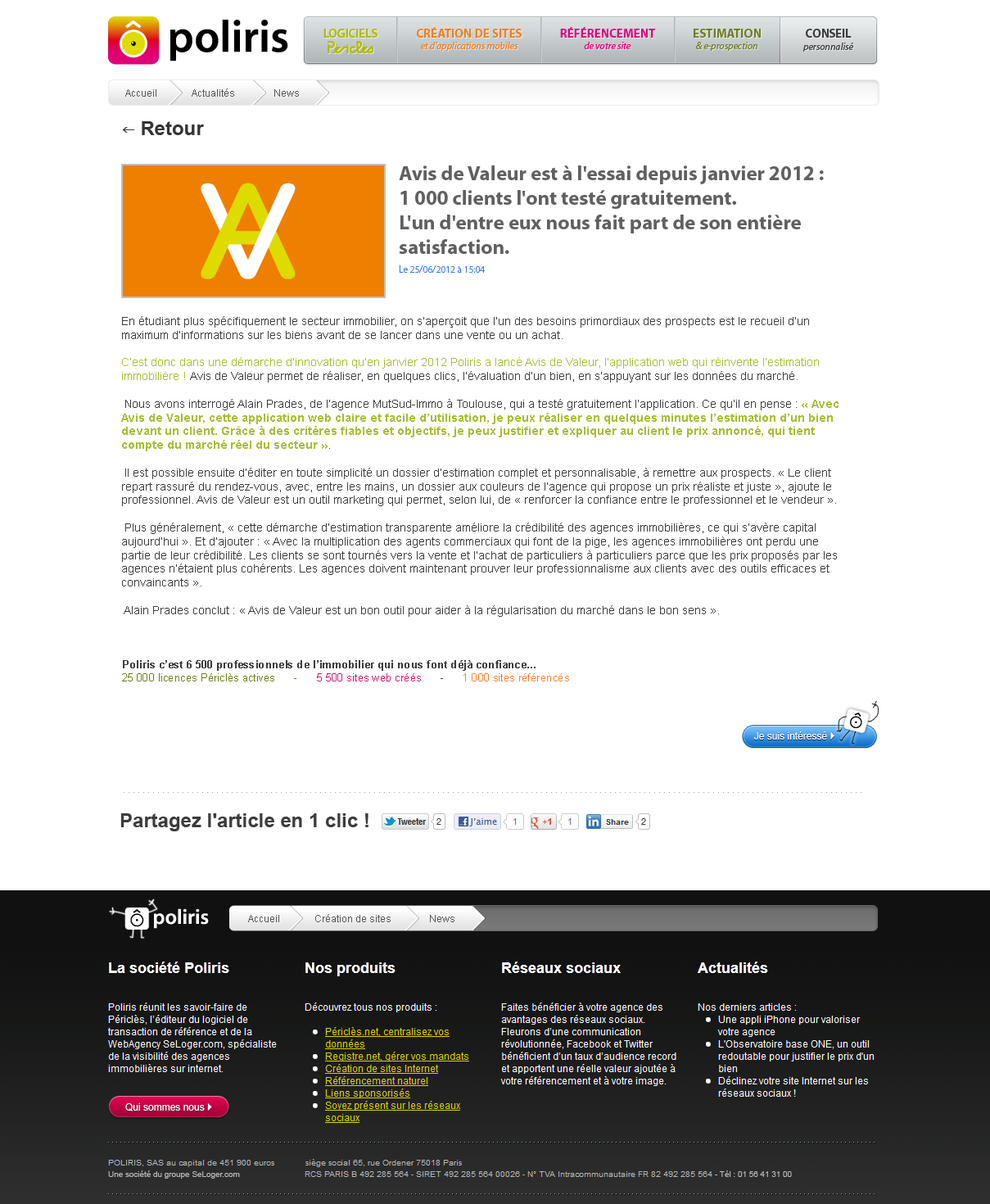
<style>
.page{position:relative;width:990px;height:1204px;background:#ffffff}
.page>*{position:absolute;margin:0}
.t1{font:12.3px "MyriadPro-Bold";letter-spacing:-0.02em;color:#b0bc00}
.t2{font:12.3px "MyriadPro-Bold";color:#ee801f;text-transform:uppercase}
.t3{font:12.3px "MyriadPro-Bold";color:#e1007a;text-transform:uppercase}
.t4{font:12.3px "MyriadPro-Bold";color:#6f7d21;text-transform:uppercase}
.t5{font:12.3px "MyriadPro-Bold";letter-spacing:-0.02em;color:#3c3c3c}
.t6{font:9.8px "MyriadPro-It";color:#ee801f}
.t7{font:9.8px "MyriadPro-It";color:#e1007a}
.t8{font:9.8px "MyriadPro-It";color:#6f7d21}
.t9{font:9.8px "MyriadPro-It";color:#3c3c3c}
.t10{font:9.8px "ArialMT";color:#565656}
.t11{font:19.7px "Arial-BoldMT";color:#343434}
.t12{font:16.4px "Wingdings3";color:#3e3e3e}
.t13{font:20.5px "MyriadPro-Bold";color:#606060}
.t14{font:9.8px "MyriadPro-Light";color:#357de3}
.t15{font:11.5px "ArialMT";color:#3c3c3c}
.t16{font:11.5px "ArialMT";color:#a7be38}
.t17{font:11.5px "Arial-BoldMT";color:#a7be38}
.t18{font:10.9px/6.3px "Arial-BoldMT";color:#3c3c3c}
.t19{font:10.9px/6.3px "ArialMT";color:#3c3c3c}
.t20{font:10.9px/6.3px "ArialMT";color:#6d7e17}
.t21{font:10.9px/6.3px "ArialMT";color:#d11b6f}
.t22{font:10.9px/6.3px "ArialMT";color:#f5822e}
.t23{font:9.8px "ArialMT";color:#ffffff}
.t24{font:9.8px "Wingdings3";color:#ffffff}
.t25{font:19.7px "Arial-BoldMT";color:#3c3c3c}
.t26{font:8.1px "ArialMT";color:#b9b9b9}
</style>
<div class="page">
<p class="t1" style="left:324px;top:29px;width:54px;height:9px">LOGICIELS</p>
<p class="t2" style="left:417px;top:27px;width:105px;height:11px">CRéATION DE SITES</p>
<p class="t3" style="left:560px;top:27px;width:95px;height:11px">Référencement</p>
<p class="t4" style="left:694px;top:29px;width:67px;height:9px">estimation</p>
<p class="t5" style="left:806px;top:29px;width:46px;height:9px">CONSEIL</p>
<p class="t6" style="left:421px;top:41px;width:98px;height:10px">et d’applications mobiles</p>
<p class="t7" style="left:584px;top:42px;width:48px;height:7px">de votre site</p>
<p class="t8" style="left:696px;top:42px;width:62px;height:9px">&amp; e-prospection</p>
<p class="t9" style="left:804px;top:43px;width:50px;height:9px">personnalisé</p>
<p class="t10" style="left:125px;top:89px;width:31px;height:8px">Accueil</p>
<p class="t10" style="left:192px;top:88px;width:42px;height:9px">Actualités</p>
<p class="t10" style="left:274px;top:89px;width:25px;height:8px">News</p>
<p class="t11" style="left:122px;top:121px;width:82px;height:14px"><span class="t12">f </span>Retour</p>
<p class="t13" style="left:399px;top:165px;width:425px;height:89px">Avis de Valeur est à l'essai depuis janvier 2012 : <br>1 000 clients l'ont testé gratuitement. <br>L'un d'entre eux nous fait part de son entière <br>satisfaction.</p>
<p class="t14" style="left:399px;top:265px;width:86px;height:8px">Le 25/06/2012 à 15:04</p>
<p class="t15" style="left:121px;top:316px;width:718px;height:301px">En étudiant plus spécifiquement le secteur immobilier, on s’aperçoit que l’un des besoins primordiaux des prospects est le recueil d’un maximum d’informations sur les biens avant de se lancer dans une vente ou un achat.<br><br><span class="t16">C’est donc dans une démarche d’innovation qu’en janvier 2012 Poliris a lancé Avis de Valeur, l’application web qui réinvente l’estimation immobilière ! </span>Avis de Valeur permet de réaliser, en quelques clics, l’évaluation d’un bien, en s’appuyant sur les données du marché.<br><br> Nous avons interrogé Alain Prades, de l’agence MutSud-Immo à Toulouse, qui a testé gratuitement l’application. Ce qu’il en pense : <span class="t17">« Avec Avis de Valeur, cette application web claire et facile d’utilisation, je peux réaliser en quelques minutes l’estimation d’un bien devant un client. Grâce à des critères fiables et objectifs, je peux justifier et expliquer au client le prix annoncé, qui tient compte du marché réel du secteur »</span>.<br><br> Il est possible ensuite d’éditer en toute simplicité un dossier d’estimation complet et personnalisable, à remettre aux prospects. « Le client repart rassuré du rendez-vous, avec, entre les mains, un dossier aux couleurs de l’agence qui propose un prix réaliste et juste », ajoute le professionnel. Avis de Valeur est un outil marketing qui permet, selon lui, de « renforcer la confiance entre le professionnel et le vendeur ».<br><br> Plus généralement, « cette démarche d’estimation transparente améliore la crédibilité des agences immobilières, ce qui s’avère capital aujourd’hui ». Et d’ajouter : « Avec la multiplication des agents commerciaux qui font de la pige, les agences immobilières ont perdu une partie de leur crédibilité. Les clients se sont tournés vers la vente et l’achat de particuliers à particuliers parce que les prix proposés par les agences n’étaient plus cohérents. Les agences doivent maintenant prouver leur professionnalisme aux clients avec des outils efficaces et convaincants ».<br><br> Alain Prades conclut : « Avis de Valeur est un bon outil pour aider à la régularisation du marché dans le bon sens ».</p>
<p class="t18" style="left:122px;top:660px;width:447px;height:22px"><span class="t19"><br></span>Poliris c’est 6 500 professionnels de l’immobilier qui nous font déjà confiance...<br><br><span class="t20">25 000 licences Périclès actives      -      </span><span class="t21">5 500 sites web créés</span><span class="t19">      -      </span><span class="t22">1 000 sites référencés</span></p>
<p class="t23" style="left:754px;top:731px;width:81px;height:9px">Je suis intéressé <span class="t24">}</span></p>
<p class="t25" style="left:120px;top:813px;width:249px;height:18px">Partagez l'article en 1 clic !</p>
<p class="t10" style="left:248px;top:915px;width:31px;height:7px">Accueil</p>
<p class="t10" style="left:315px;top:914px;width:76px;height:8px">Création de sites</p>
<p class="t10" style="left:430px;top:915px;width:25px;height:7px">News</p>
<p class="t23" style="left:125px;top:1103px;width:87px;height:9px">Qui sommes nous <span class="t24">}</span></p>
<p class="t26" style="left:108px;top:1171px;width:132px;height:8px">Une société du groupe SeLoger.com</p>
<p class="t26" style="left:715px;top:1171px;width:77px;height:6px">- Tél : 01 56 41 31 00</p>
</div>
